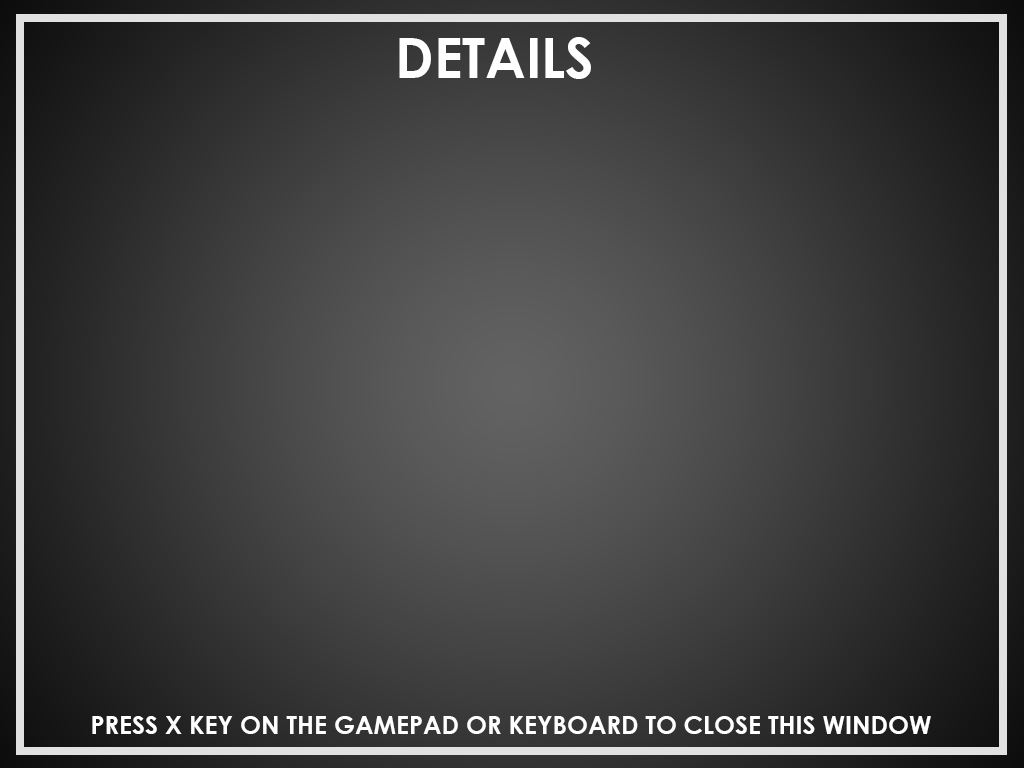
<style>
.page{position:relative;width:1024px;height:768px}
.page>*{position:absolute;margin:0}
.t1{font:55px "CenturyGothic-Bold";color:#ffffff}
.t2{font:25px "CenturyGothic-Bold";color:#ffffff}
</style>
<div class="page">
<p class="t1" style="left:399px;top:37px;width:192px;height:42px">DETAILS</p>
<p class="t2" style="left:92px;top:716px;width:839px;height:18px">PRESS X KEY ON THE GAMEPAD OR KEYBOARD TO CLOSE THIS WINDOW</p>
</div>
